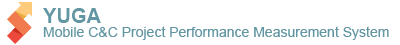
<style>
.page{position:relative;width:400px;height:45px;background:#ffffff}
.page>*{position:absolute;margin:0}
.t1{font:20px "Arial-BoldMT";color:#6396a3}
.t2{font:14px "ArialMT";color:#6396a3}
</style>
<div class="page">
<p class="t1" style="left:43px;top:8px;width:58px;height:15px">YUGA</p>
<p class="t2" style="left:43px;top:26px;width:346px;height:14px">Mobile C&amp;C Project Performance Measurement System</p>
</div>
